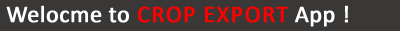
<style>
.page{position:relative;width:400px;height:31px;background:#393836}
.page>*{position:absolute;margin:0}
.t1{font:24px "Calibri";color:#ff0000;text-transform:uppercase;font-weight:bold}
.t2{font:24px "Calibri";color:#ffffff;font-weight:bold}
</style>
<div class="page">
<p class="t1" style="left:6px;top:5px;width:342px;height:22px"><span class="t2">Welocme to </span>Crop Export<span class="t2"> App !</span></p>
</div>
